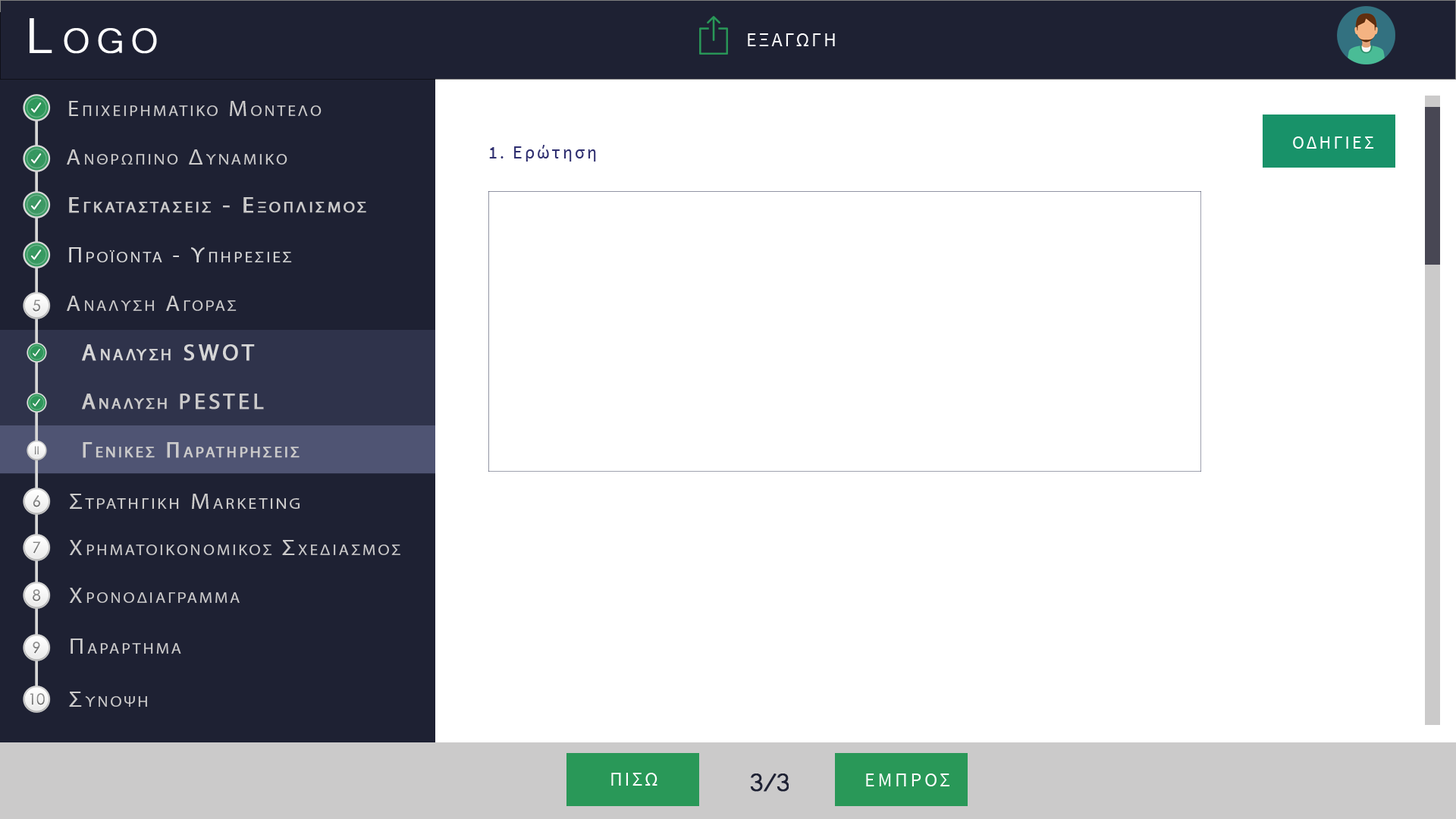
<style>
.page{position:relative;width:1456px;height:819px;background:#ffffff}
.page>*{position:absolute;margin:0}
.t1{font:63.7px "Microsoft-Yi-Baiti";letter-spacing:0.13em;color:#ffffff;font-variant:small-caps;font-weight:bold}
.t2{font:20px "SourceSansPro-Regular";letter-spacing:0.1em;color:#fefefe;text-transform:uppercase}
.t3{font:21.7px "MyriadPro-Regular";letter-spacing:0.13em;color:#cbcaca;font-variant:small-caps;scale:1.09 1}
.t4{font:23.4px "Microsoft-Yi-Baiti";letter-spacing:0.13em;color:#cbcaca;font-variant:small-caps;font-weight:bold}
.t5{font:18.2px "SourceSansPro-Regular";letter-spacing:0.13em;color:#ffffff;text-transform:uppercase}
.t6{font:18.2px "SourceSansPro-Regular";letter-spacing:0.13em;color:#2f2f70}
.t7{font:18.2px "SourceSansPro-Regular";letter-spacing:0.13em;color:#2f2f70;text-transform:uppercase}
.t8{font:21.7px/91px "MyriadPro-Regular";letter-spacing:0.13em;color:#cbcaca;font-variant:small-caps;font-weight:bold;scale:1.09 1}
.t9{font:23.4px/91px "Microsoft-Yi-Baiti";letter-spacing:0.13em;color:#cbcaca;font-variant:small-caps;font-weight:bold}
.t10{font:21.7px "MyriadPro-Regular";letter-spacing:0.13em;color:#d6d6d6;font-variant:small-caps;scale:1.09 1}
.t11{font:23.4px "Microsoft-Yi-Baiti";letter-spacing:0.13em;color:#d6d6d6;font-variant:small-caps;font-weight:bold}
.t12{font:15.3px "CenturyGothic";color:#898989}
.t13{font:23.4px "MyriadPro-Regular";letter-spacing:0.13em;color:#d6d6d6;font-variant:small-caps;font-weight:bold}
.t14{font:22.3px "MyriadPro-Regular";letter-spacing:0.13em;color:#cbcaca;font-variant:small-caps;font-weight:bold}
.t15{font:11.2px "CenturyGothic";color:#828282}
.t16{font:15.3px "CenturyGothic";color:#838383}
.t17{font:22.2px "MyriadPro-Regular";letter-spacing:0.13em;color:#cbcaca;font-variant:small-caps;scale:1.09 1}
.t18{font:25.5px "Microsoft-Yi-Baiti";letter-spacing:0.13em;color:#cbcaca;font-variant:small-caps;font-weight:bold}
.t19{font:15.3px "CenturyGothic";color:#888888}
.t20{font:15.3px "CenturyGothic";color:#8b8b8b}
.t21{font:23.7px "Microsoft-Yi-Baiti";letter-spacing:0.13em;color:#cbcaca;font-variant:small-caps;scale:1.09 1}
.t22{font:15.3px "CenturyGothic";color:#878787}
.t23{font:32.8px "Microsoft-Yi-Baiti";letter-spacing:-0.1em;color:#1e2133;font-weight:bold}
.t24{font:20px "SourceSansPro-Regular";letter-spacing:0.13em;color:#fefefe;text-transform:uppercase}
</style>
<div class="page">
<p class="t1" style="left:30px;top:18px;width:127px;height:36px">Logo</p>
<p class="t2" style="left:748px;top:33px;width:87px;height:13px">εξαγωγη</p>
<p class="t3" style="left:69px;top:101px;width:253px;height:15px"><span class="t4">   </span>Επιχειρηματικο Μοντελο</p>
<p class="t5" style="left:1293px;top:136px;width:81px;height:13px">Οδηγιεσ</p>
<p class="t3" style="left:67px;top:149px;width:220px;height:16px"><span class="t4">   </span>Ανθρωπινο Δυναμικο</p>
<p class="t6" style="left:489px;top:145px;width:107px;height:17px"><span class="t7">1. </span>Ερώτηση</p>
<p class="t8" style="left:69px;top:197px;width:297px;height:16px"><span class="t9">   </span>Εγκαταστασεισ - Εξοπλισμοσ<br><br><span class="t9">Equipment</span></p>
<p class="t10" style="left:69px;top:247px;width:223px;height:15px"><span class="t11">   </span>Προϊοντα - Υπηρεσιεσ</p>
<p class="t12" style="left:33px;top:300px;width:7px;height:12px">5</p>
<p class="t3" style="left:67px;top:296px;width:170px;height:15px"><span class="t4">   </span>Αναλυση Αγορασ</p>
<p class="t13" style="left:82px;top:344px;width:173px;height:17px">Αναλυση SWOT</p>
<p class="t14" style="left:82px;top:394px;width:182px;height:15px">Αναλυση PESTEL</p>
<p class="t15" style="left:35px;top:446px;width:4px;height:9px">II</p>
<p class="t14" style="left:83px;top:442px;width:217px;height:16px">Γενικεσ Παρατηρησεισ</p>
<p class="t16" style="left:33px;top:495px;width:7px;height:12px">6</p>
<p class="t17" style="left:70px;top:494px;width:230px;height:15px"><span class="t18">   </span>Στρατηγικη Marketing</p>
<p class="t19" style="left:33px;top:541px;width:8px;height:13px">7</p>
<p class="t3" style="left:69px;top:540px;width:331px;height:15px"><span class="t18">   </span>Χρηματοικονομικοσ Σχεδιασμοσ</p>
<p class="t20" style="left:33px;top:589px;width:8px;height:12px">8</p>
<p class="t3" style="left:69px;top:588px;width:171px;height:15px"><span class="t18">   </span>Χρονοδιαγραμμα</p>
<p class="t16" style="left:33px;top:642px;width:7px;height:12px">9</p>
<p class="t3" style="left:71px;top:639px;width:110px;height:15px"><span class="t21">   </span>Παραρτημα</p>
<p class="t22" style="left:30px;top:693px;width:15px;height:12px">10</p>
<p class="t3" style="left:69px;top:692px;width:78px;height:15px"><span class="t21">   </span>Συνοψη</p>
<p class="t2" style="left:611px;top:773px;width:46px;height:13px">Πισω</p>
<p class="t23" style="left:750px;top:773px;width:39px;height:19px">3/3</p>
<p class="t24" style="left:866px;top:773px;width:83px;height:13px">εμπροσ</p>
</div>
